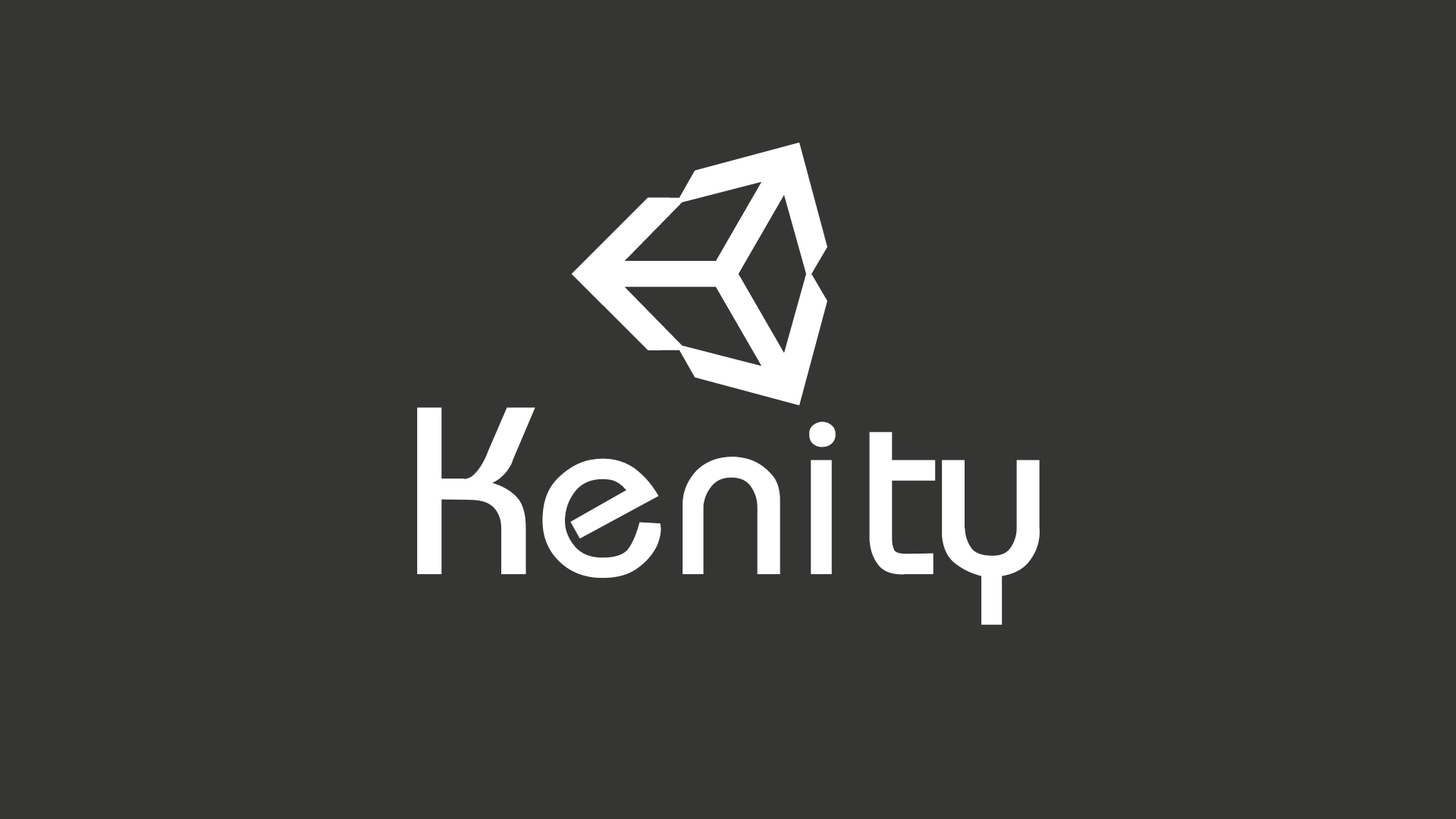
<style>
.page{position:relative;width:1456px;height:819px;background:#353534}
.page>*{position:absolute;margin:0}
.t1{font:237.4px "ZhunYuan";color:#ffffff}
</style>
<div class="page">
<p class="t1" style="left:417px;top:407px;width:623px;height:218px">Kenity</p>
</div>
